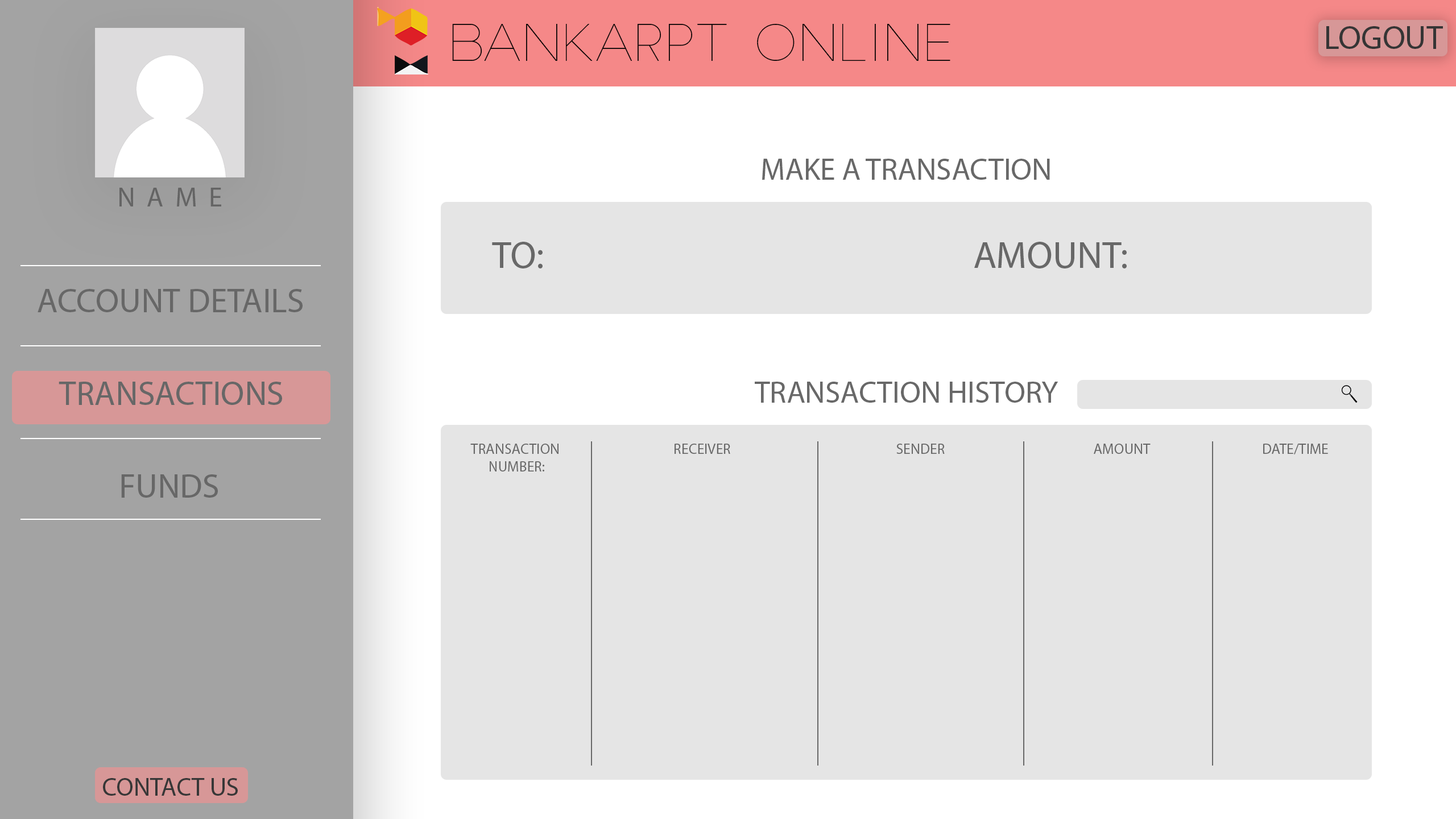
<style>
.page{position:relative;width:1456px;height:819px;background:#e5e5e5}
.page>*{position:absolute;margin:0}
.t1{font:30.6px "MyriadPro-Regular";color:#686868}
.t2{font:38px "MyriadPro-Regular";color:#686868}
.t3{font:14.6px "MyriadPro-Regular";color:#686868}
</style>
<div class="page">
<p class="t1" style="left:762px;top:159px;width:288px;height:21px">MAKE A TRANSACTION</p>
<p class="t2" style="left:492px;top:242px;width:51px;height:26px">TO:</p>
<p class="t2" style="left:974px;top:242px;width:153px;height:26px">AMOUNT:</p>
<p class="t1" style="left:755px;top:382px;width:303px;height:21px">TRANSACTION HISTORY</p>
<p class="t3" style="left:470px;top:444px;width:89px;height:27px;text-align:center">TRANSACTION <br>NUMBER:</p>
<p class="t3" style="left:675px;top:444px;width:55px;height:10px">RECEIVER</p>
<p class="t3" style="left:896px;top:444px;width:49px;height:10px">SENDER</p>
<p class="t3" style="left:1094px;top:444px;width:57px;height:10px">AMOUNT</p>
<p class="t3" style="left:1263px;top:444px;width:65px;height:10px">DATE/TIME</p>
</div>
